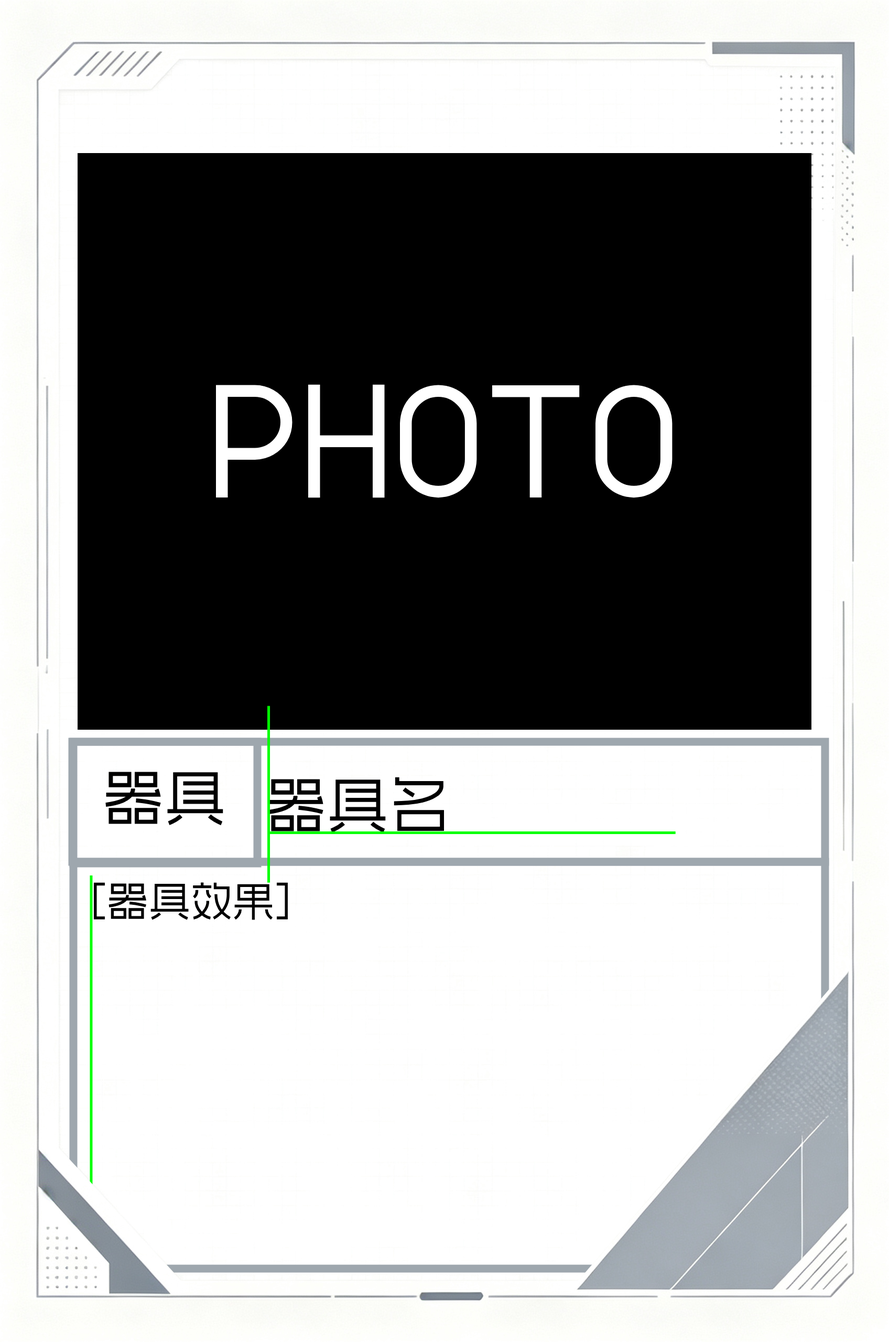
<style>
.page{position:relative;width:889px;height:1342px;background:#000000}
.page>*{position:absolute;margin:0}
.t1{font:61.8px "AidianFengYaHei";color:#000000}
.t2{font:41.9px "AidianFengYaHei";color:#000000}
</style>
<div class="page">
<p class="t1" style="left:105px;top:771px;width:118px;height:54px">器具</p>
<p class="t1" style="left:268px;top:777px;width:176px;height:56px">器具名</p>
<p class="t2" style="left:94px;top:882px;width:194px;height:38px">[器具效果]</p>
</div>
